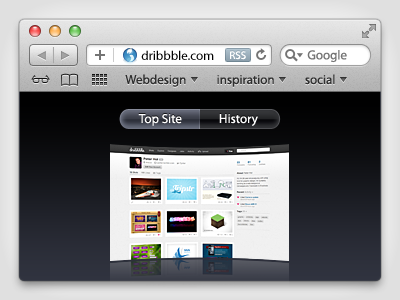
<style>
.page{position:relative;width:400px;height:300px}
.page>*{position:absolute;margin:0}
.t1{font:13px "MyriadPro-Regular";color:#000000}
.t2{font:11px "MyriadPro-Regular";color:#ffffff}
.t3{font:13px "MyriadPro-Regular";color:#747474}
.t4{font:13px "MyriadPro-Regular";color:#2f2f2f}
.t5{font:13px "MyriadPro-Regular";color:#ffffff}
</style>
<div class="page">
<p class="t1" style="left:141px;top:50px;width:73px;height:10px">dribbble.com</p>
<p class="t2" style="left:230px;top:51px;width:16px;height:9px">RSS</p>
<p class="t3" style="left:307px;top:50px;width:40px;height:13px">Google</p>
<p class="t4" style="left:125px;top:74px;width:210px;height:13px">Webdesign           inspiration           social</p>
<p class="t5" style="left:138px;top:114px;width:44px;height:12px">Top Site</p>
<p class="t5" style="left:219px;top:114px;width:39px;height:12px">History</p>
</div>
